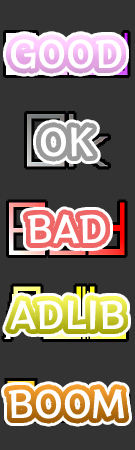
<style>
.page{position:relative;width:135px;height:450px;background:#333333}
.page>*{position:absolute;margin:0}
.t1{font:36px "RocknRollOne-Regular";color:#ffffff}
</style>
<div class="page">
<p class="t1" style="left:10px;top:39px;width:112px;height:30px">GOOD</p>
<p class="t1" style="left:40px;top:127px;width:54px;height:30px">OK</p>
<p class="t1" style="left:27px;top:214px;width:79px;height:30px">BAD</p>
<p class="t1" style="left:10px;top:300px;width:114px;height:30px">ADLIB</p>
<p class="t1" style="left:8px;top:389px;width:117px;height:30px">BOOM</p>
</div>
